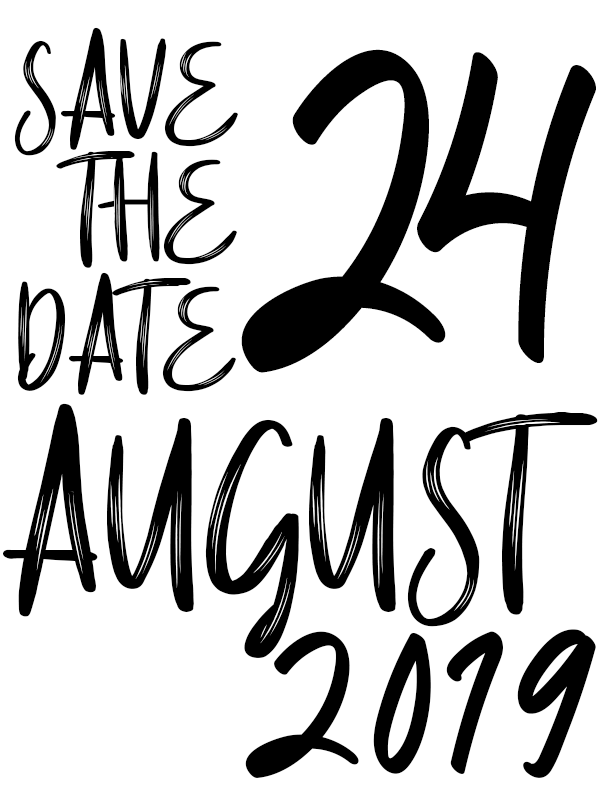
<style>
.page{position:relative;width:600px;height:800px;background:#ffffff}
.page>*{position:absolute;margin:0}
.t1{font:116.7px "Amsterdam-Regular";color:#000000}
.t2{font:343px "HolidayFreeRegular";letter-spacing:-0.2em;color:#000000;scale:0.82 1}
.t3{font:204.2px "Amsterdam-Regular";color:#000000}
.t4{font:155.6px "HolidayFreeRegular";color:#000000}
</style>
<div class="page">
<p class="t1" style="left:14px;top:27px;width:224px;height:129px">SAVE</p>
<p class="t2" style="left:241px;top:49px;width:355px;height:324px">24</p>
<p class="t1" style="left:56px;top:151px;width:181px;height:117px">THE</p>
<p class="t1" style="left:17px;top:272px;width:219px;height:123px">DATE</p>
<p class="t3" style="left:3px;top:403px;width:595px;height:255px">AUGUST</p>
<p class="t4" style="left:245px;top:629px;width:351px;height:149px">2019</p>
</div>
